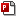
<style>
.page{position:relative;width:16px;height:16px;background:#ffffff}
.page>*{position:absolute;margin:0}
.t1{font:7px "Myriad-Bold";color:#ffffff;scale:0.9 1}
</style>
<div class="page">
<p class="t1" style="left:3px;top:5px;width:3px;height:5px">P</p>
</div>
